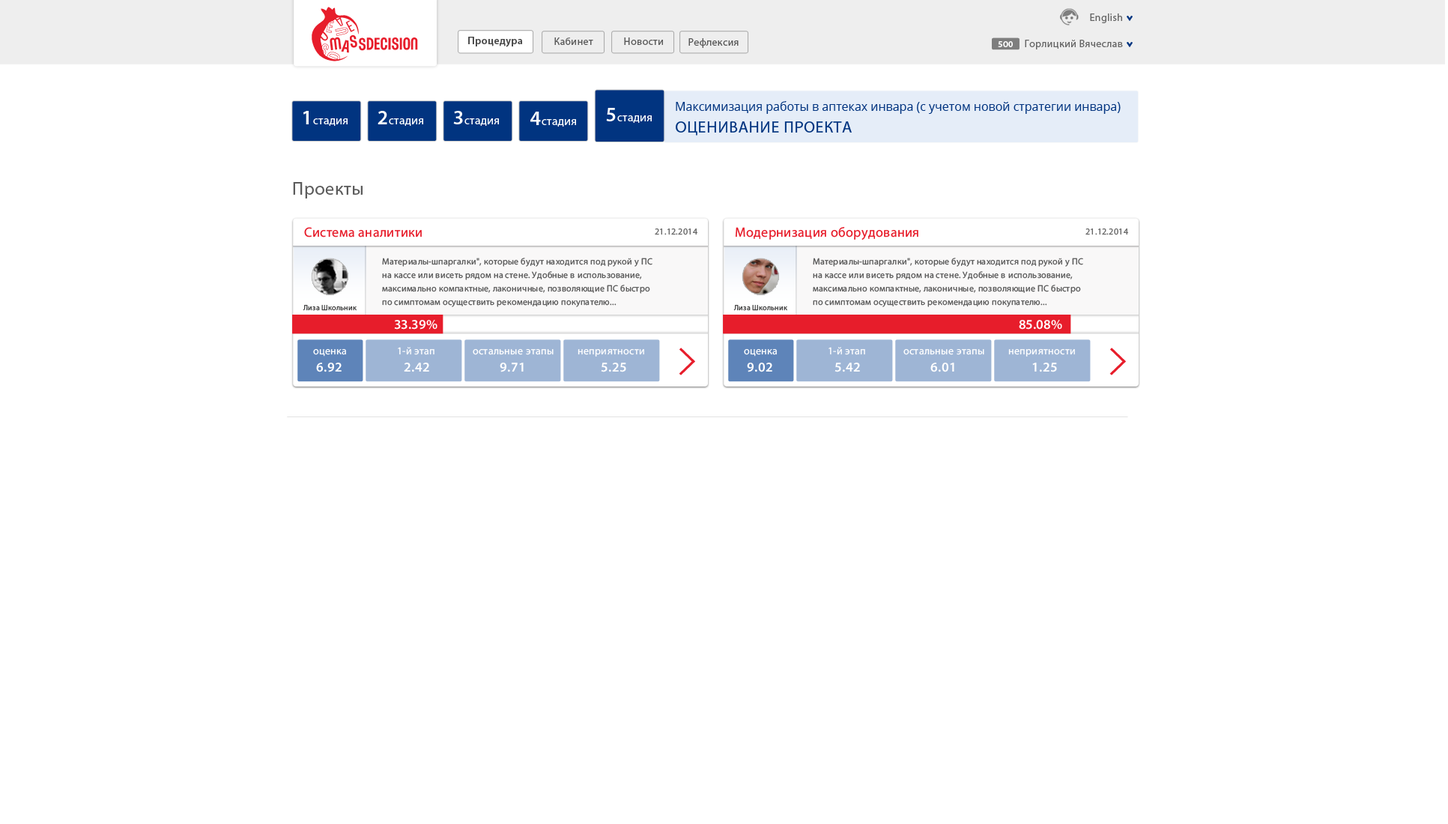
<style>
.page{position:relative;width:1448px;height:824px;background:#ffffff}
.page>*{position:absolute;margin:0}
.t1{font:10.5px "MyriadPro-Regular";letter-spacing:0.025em;color:#666666}
.t2{font:10.5px "MyriadPro-Semibold";letter-spacing:0.025em;color:#434343}
.t3{font:10.5px "MyriadPro-Regular";letter-spacing:0.025em;color:#5a5a5a}
.t4{font:9px "MyriadPro-Semibold";letter-spacing:0.025em;color:#ffffff}
.t5{font:12px "OpenSans";color:#013480}
.t6{font:11.6px "MyriadPro-Regular";letter-spacing:0.025em;color:#ffffff}
.t7{font:20.3px "MyriadPro-Semibold";letter-spacing:0.025em;color:#ffffff}
.t8{font:16.5px "MyriadPro-Regular";letter-spacing:0.025em;color:#013480}
.t9{font:18px "MyriadPro-Regular";letter-spacing:0.025em;color:#5c5c5c}
.t10{font:13.5px "MyriadPro-Regular";letter-spacing:0.025em;color:#e71d2b}
.t11{font:9px "MyriadPro-Regular";letter-spacing:0.025em;color:#686868}
.t12{font:9px/13.5px "MyriadPro-Regular";letter-spacing:0.025em;color:#5e5e5e}
.t13{font:7.5px "MyriadPro-Regular";letter-spacing:0.025em;color:#414040}
.t14{font:13.5px "MyriadPro-Semibold";color:#fffefe}
.t15{font:10.5px "MyriadPro-Regular";letter-spacing:0.025em;color:#ffffff}
.t16{font:13.5px "MyriadPro-Semibold";letter-spacing:0.025em;color:#ffffff}
</style>
<div class="page">
<p class="t1" style="left:1090px;top:13px;width:32px;height:10px">English</p>
<p class="t2" style="left:468px;top:37px;width:54px;height:10px">Процедура</p>
<p class="t3" style="left:554px;top:37px;width:39px;height:8px">Кабинет</p>
<p class="t3" style="left:624px;top:37px;width:39px;height:8px">Новости</p>
<p class="t3" style="left:688px;top:38px;width:50px;height:10px">Рефлексия</p>
<p class="t4" style="left:997px;top:41px;width:15px;height:6px">500</p>
<p class="t1" style="left:1024px;top:40px;width:99px;height:9px">Горлицкий Вячеслав</p>
<p class="t5" style="left:675px;top:101px;width:445px;height:13px">Максимизация работы в аптеках инвара (с учетом новой стратегии инвара)</p>
<p class="t6" style="left:303px;top:111px;width:44px;height:15px"><span class="t7">1</span>стадия</p>
<p class="t6" style="left:377px;top:111px;width:46px;height:15px"><span class="t7">2</span>стадия</p>
<p class="t6" style="left:453px;top:111px;width:46px;height:15px"><span class="t7">3</span>стадия</p>
<p class="t6" style="left:530px;top:112px;width:46px;height:15px"><span class="t7">4</span>стадия</p>
<p class="t6" style="left:606px;top:108px;width:46px;height:15px"><span class="t7">5</span>стадия</p>
<p class="t8" style="left:675px;top:121px;width:176px;height:15px">ОЦЕНИВАНИЕ ПРОЕКТА</p>
<p class="t9" style="left:293px;top:182px;width:69px;height:16px">Проекты</p>
<p class="t10" style="left:304px;top:227px;width:118px;height:10px">Система аналитики</p>
<p class="t11" style="left:655px;top:228px;width:42px;height:7px">21.12.2014</p>
<p class="t10" style="left:735px;top:227px;width:183px;height:13px">Модернизация оборудования</p>
<p class="t11" style="left:1085px;top:228px;width:43px;height:7px">21.12.2014</p>
<p class="t12" style="left:382px;top:258px;width:270px;height:49px">Материалы-шпаргалки", которые будут находится под рукой у ПС <br>на кассе или висеть рядом на стене. Удобные в использование, <br>максимально компактные, лаконичные, позволяющие ПС быстро <br>по симптомам осуществить рекомендацию покупателю...</p>
<p class="t12" style="left:813px;top:258px;width:270px;height:49px">Материалы-шпаргалки", которые будут находится под рукой у ПС <br>на кассе или висеть рядом на стене. Удобные в использование, <br>максимально компактные, лаконичные, позволяющие ПС быстро <br>по симптомам осуществить рекомендацию покупателю...</p>
<p class="t13" style="left:303px;top:305px;width:53px;height:6px">Лиза Школьник</p>
<p class="t13" style="left:733px;top:305px;width:54px;height:6px">Лиза Школьник</p>
<p class="t14" style="left:394px;top:320px;width:43px;height:10px">33.39%</p>
<p class="t14" style="left:1018px;top:320px;width:44px;height:10px">85.08%</p>
<p class="t15" style="left:313px;top:349px;width:33px;height:7px">оценка</p>
<p class="t15" style="left:398px;top:347px;width:36px;height:8px">1-й этап</p>
<p class="t15" style="left:473px;top:349px;width:80px;height:6px">остальные этапы</p>
<p class="t15" style="left:577px;top:349px;width:67px;height:7px">неприятности</p>
<p class="t15" style="left:744px;top:349px;width:33px;height:7px">оценка</p>
<p class="t15" style="left:828px;top:347px;width:37px;height:8px">1-й этап</p>
<p class="t15" style="left:903px;top:349px;width:81px;height:6px">остальные этапы</p>
<p class="t15" style="left:1008px;top:349px;width:67px;height:7px">неприятности</p>
<p class="t16" style="left:316px;top:362px;width:25px;height:10px">6.92</p>
<p class="t16" style="left:404px;top:362px;width:25px;height:10px">2.42</p>
<p class="t16" style="left:499px;top:362px;width:24px;height:10px">9.71</p>
<p class="t16" style="left:601px;top:362px;width:25px;height:10px">5.25</p>
<p class="t16" style="left:747px;top:362px;width:25px;height:10px">9.02</p>
<p class="t16" style="left:834px;top:362px;width:26px;height:10px">5.42</p>
<p class="t16" style="left:930px;top:362px;width:24px;height:10px">6.01</p>
<p class="t16" style="left:1032px;top:362px;width:25px;height:10px">1.25</p>
</div>
